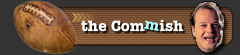
<style>
.page{position:relative;width:240px;height:55px;background:#333333}
.page>*{position:absolute;margin:0}
.t1{font:15.5px "AmericanTypewriter-Bold";letter-spacing:0.01em;color:#ffffff}
.t2{font:15.5px "AmericanTypewriter-Bold";letter-spacing:0.01em;color:#a8ffff}
</style>
<div class="page">
<p class="t1" style="left:81px;top:19px;width:103px;height:13px">the Com    ish</p>
<p class="t2" style="left:144px;top:20px;width:15px;height:11px;rotate:10deg">m</p>
</div>
